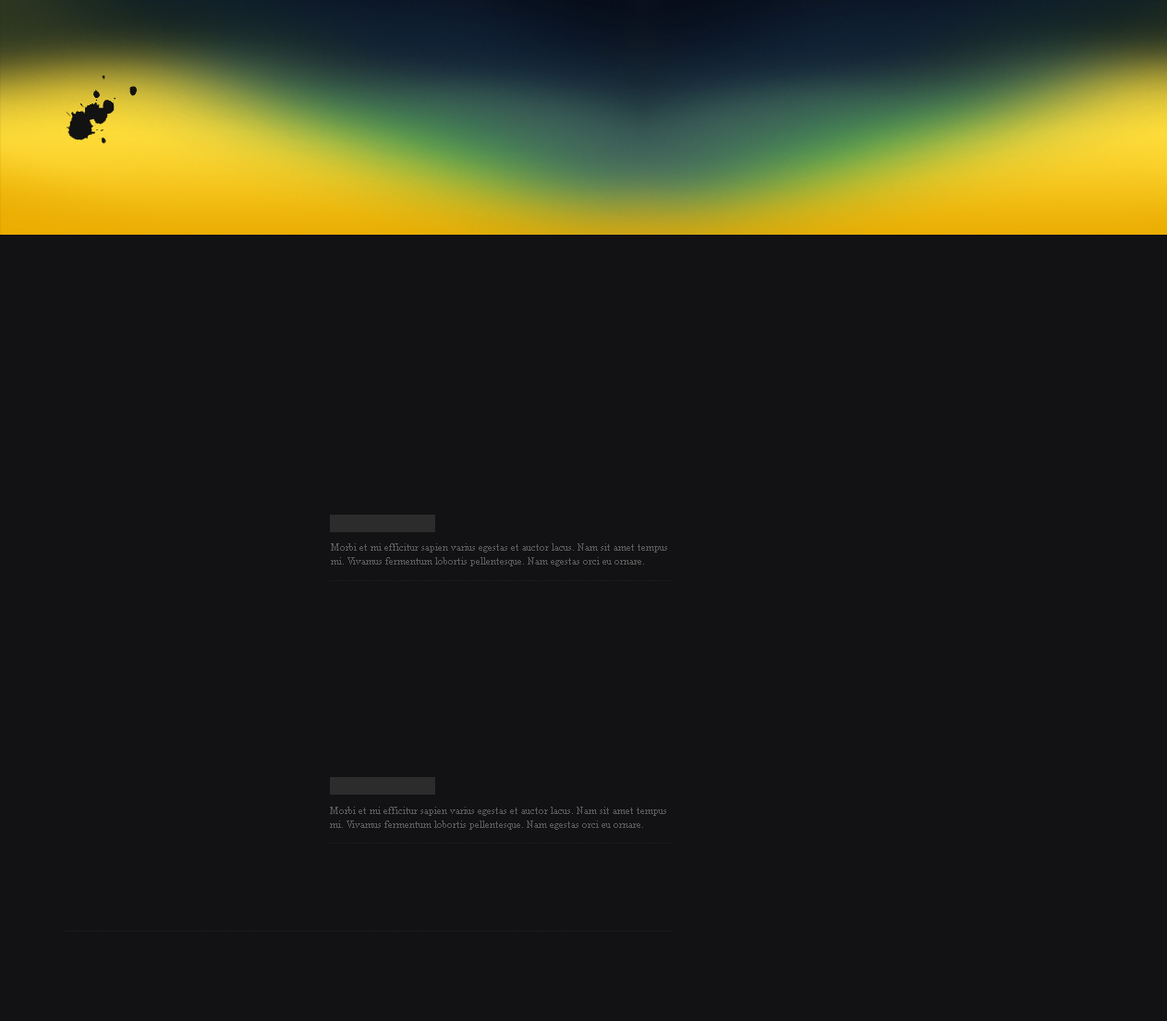
<style>
.page{position:relative;width:1167px;height:1021px;background:#121214}
.page>*{position:absolute;margin:0}
.t1{font:10.2px/13.9px "TimesNewRomanPSMT";color:#595959}
</style>
<div class="page">
<p class="t1" style="left:331px;top:544px;width:336px;height:23px">Morbi et mi efficitur sapien varius egestas et auctor lacus. Nam sit amet tempus <br>mi. Vivamus fermentum lobortis pellentesque. Nam egestas orci eu ornare.</p>
<p class="t1" style="left:330px;top:807px;width:336px;height:23px">Morbi et mi efficitur sapien varius egestas et auctor lacus. Nam sit amet tempus <br>mi. Vivamus fermentum lobortis pellentesque. Nam egestas orci eu ornare.</p>
</div>
